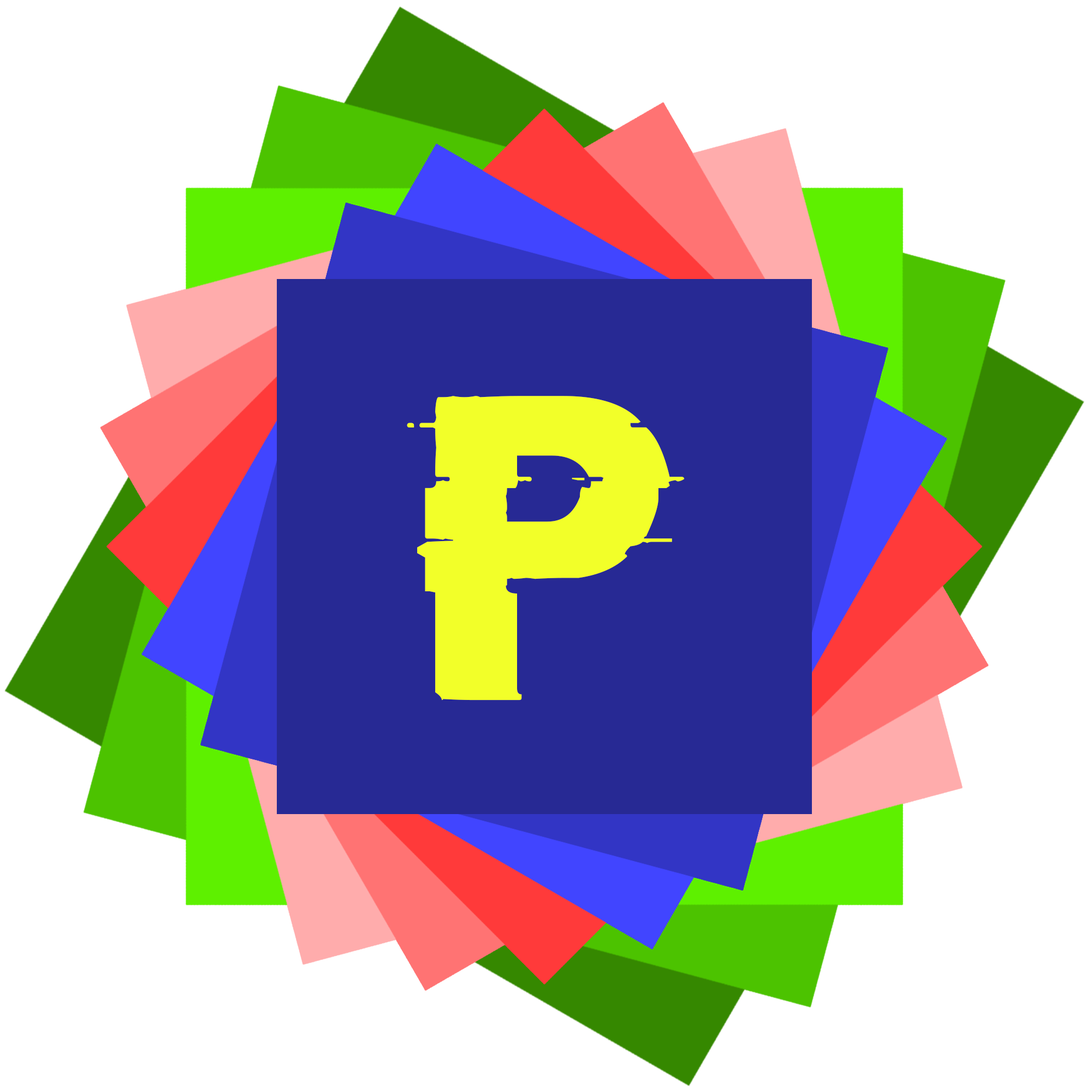
<style>
.page{position:relative;width:1092px;height:1092px;background:#ffffff}
.page>*{position:absolute;margin:0}
.t1{font:338.6px "DoctorGlitch";color:#f2ff29}
</style>
<div class="page">
<p class="t1" style="left:407px;top:396px;width:278px;height:305px">P</p>
</div>
